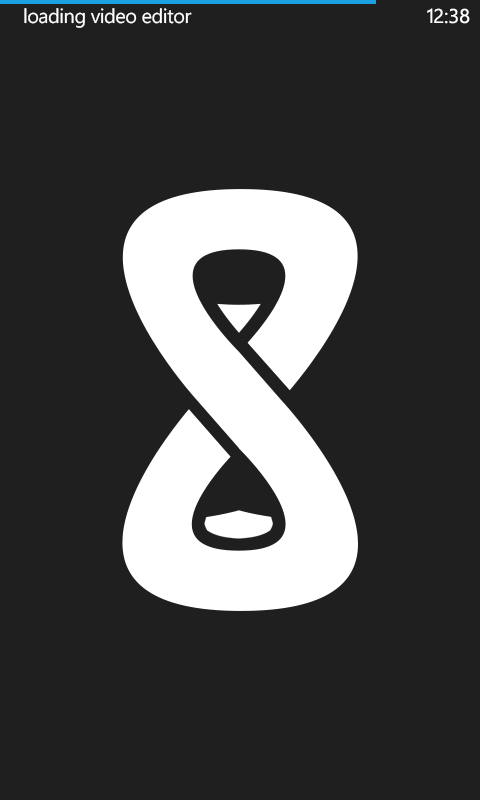
<style>
.page{position:relative;width:480px;height:800px;background:#1f1f1f}
.page>*{position:absolute;margin:0}
.t1{font:20px "SegoeWP";letter-spacing:-0.025em;color:#ffffff}
.t2{font:20px "SegoeWP";color:#ffffff}
.t3{font:20px "SegoeWP";letter-spacing:-0.05em;color:#ffffff}
</style>
<div class="page">
<p class="t1" style="left:24px;top:8px;width:168px;height:20px">loading video editor</p>
<p class="t2" style="left:427px;top:8px;width:43px;height:16px"><span class="t3">1</span>2:38</p>
</div>
